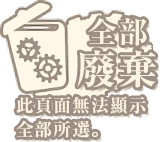
<style>
.page{position:relative;width:162px;height:142px;background:#ffffff}
.page>*{position:absolute;margin:0}
.t1{font:30px/32px "RyuminPr6N-ExBold";letter-spacing:0.05em;color:#fcf4e3}
.t2{font:40px/32px "RyuminPr6N-ExBold";letter-spacing:0.05em;color:#fcf4e3}
.t3{font:18px/24px "RyuminPr6N-ExBold";letter-spacing:0.05em;color:#fcf4e3}
</style>
<div class="page">
<p class="t1" style="left:77px;top:17px;width:79px;height:71px;text-align:center">全部<br><span class="t2">廢棄</span></p>
<p class="t3" style="left:16px;top:96px;width:130px;height:42px">此頁面無法顯示<br>全部所選。</p>
</div>
